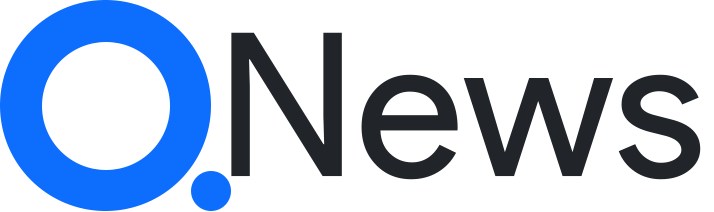
<style>
.page{position:relative;width:714px;height:212px;background:#ffffff}
.page>*{position:absolute;margin:0}
.t1{font:200px "ProductSans-Regular";color:#212529}
</style>
<div class="page">
<p class="t1" style="left:231px;top:32px;width:470px;height:148px">News</p>
</div>
